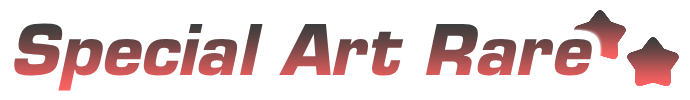
<style>
.page{position:relative;width:690px;height:100px;background:#ffffff}
.page>*{position:absolute;margin:0}
.t1{font:68px "Eurostile-BoldOblique"}
</style>
<div class="page">
<p class="t1" style="left:14px;top:23px;width:578px;height:68px">Special Art Rare</p>
</div>
